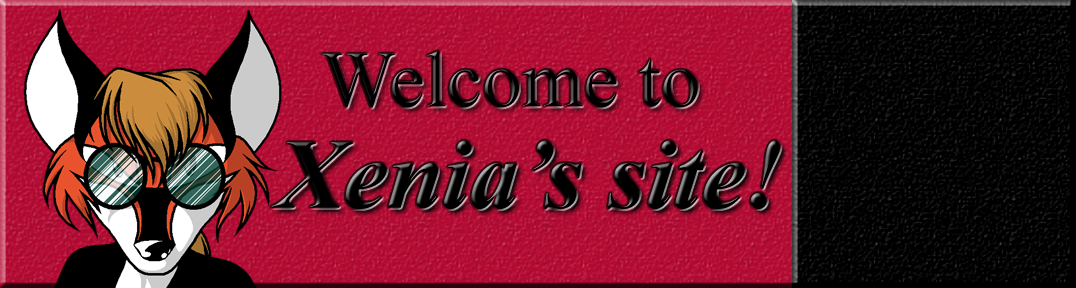
<style>
.page{position:relative;width:1076px;height:288px;background:#000000}
.page>*{position:absolute;margin:0}
.t1{font:79.4px "TimesNewRomanPSMT";color:#000000}
.t2{font:98.9px "TimesNewRomanPS-BoldItalicMT";color:#000000}
</style>
<div class="page">
<p class="t1" style="left:322px;top:51px;width:376px;height:57px">Welcome to</p>
<p class="t2" style="left:271px;top:140px;width:510px;height:69px">Xenia’s site!</p>
</div>
